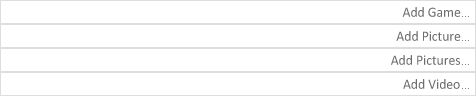
<style>
.page{position:relative;width:476px;height:96px;background:#ffffff}
.page>*{position:absolute;margin:0}
.t1{font:14.4px "Calibri";color:#6e6d6d;scale:0.95 1}
</style>
<div class="page">
<p class="t1" style="left:402px;top:7px;width:59px;height:10px">Add Game</p>
<p class="t1" style="left:396px;top:31px;width:65px;height:10px">Add Picture</p>
<p class="t1" style="left:391px;top:55px;width:69px;height:10px">Add Pictures</p>
<p class="t1" style="left:403px;top:79px;width:57px;height:10px">Add Video</p>
</div>
